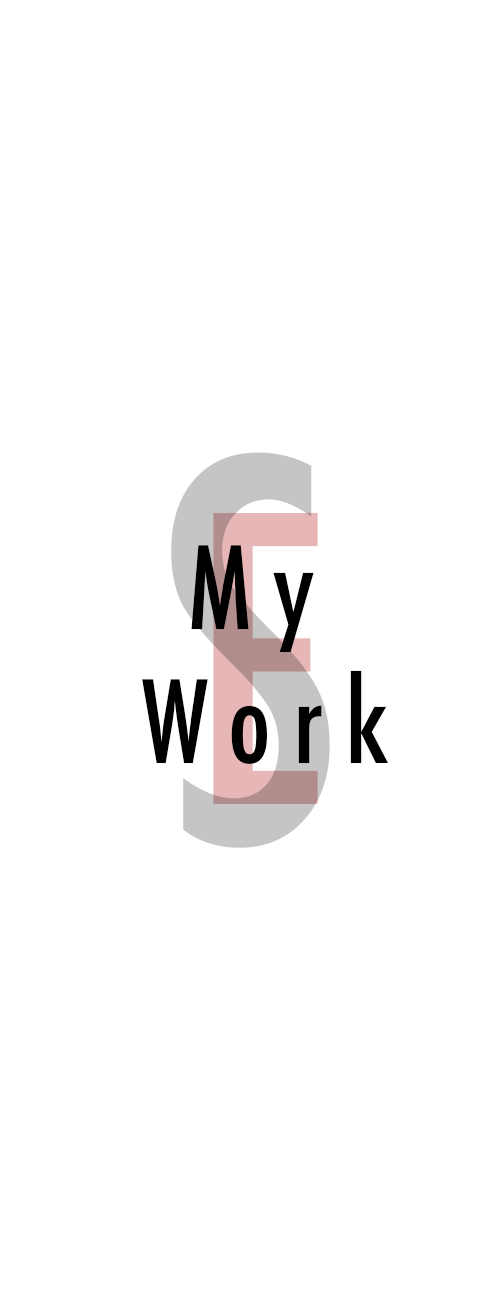
<style>
.page{position:relative;width:500px;height:1300px;background:#ffffff}
.page>*{position:absolute;margin:0}
.t1{font:111px "Futura-CondensedMedium";letter-spacing:0.2em;color:#000000}
</style>
<div class="page">
<p class="t1" style="left:142px;top:545px;width:246px;height:219px">My <br>Work</p>
</div>
